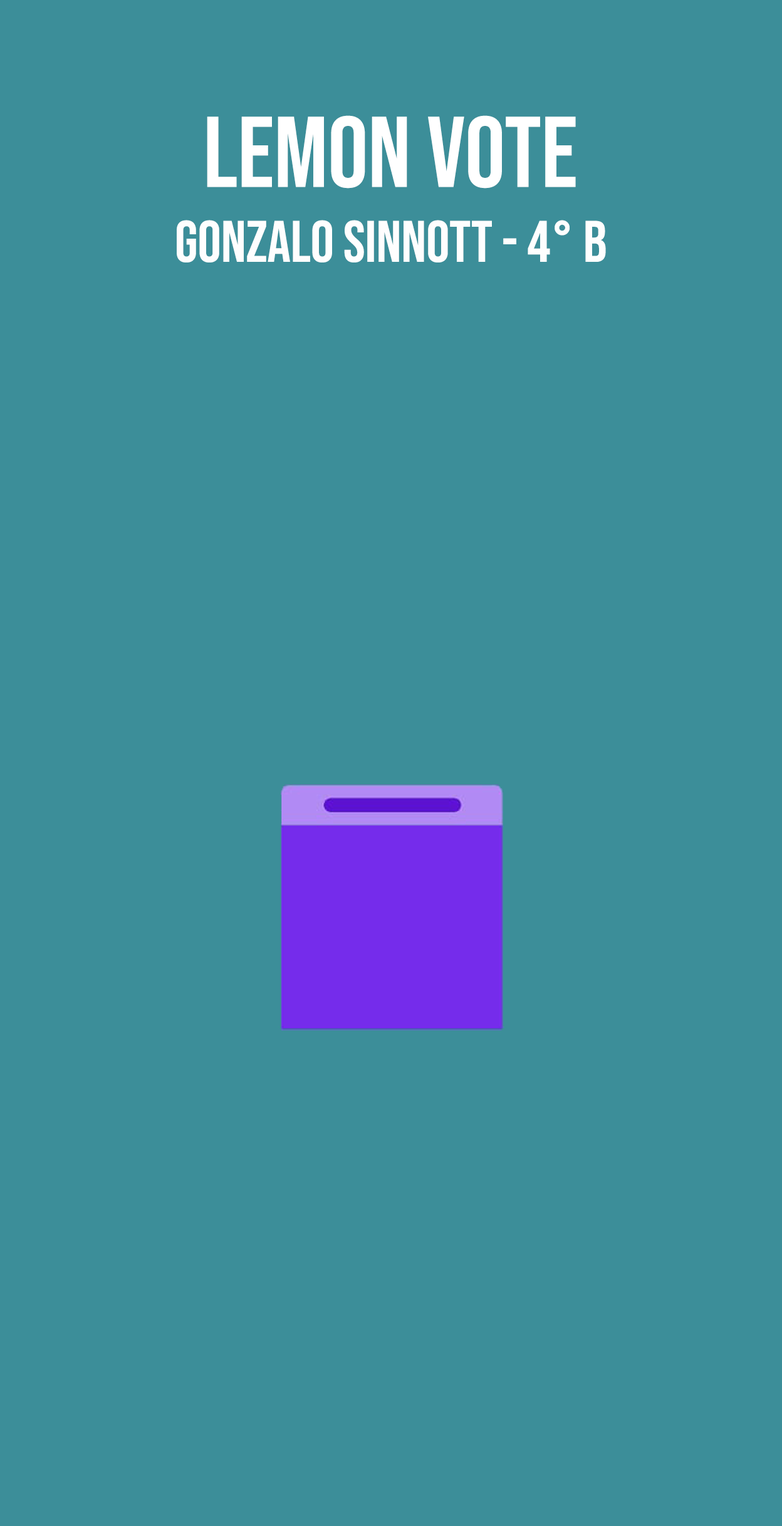
<style>
.page{position:relative;width:782px;height:1526px;background:#3c8e99}
.page>*{position:absolute;margin:0}
.t1{font:100.2px "BebasNeue-Regular";color:#ffffff}
.t2{font:58.5px "BebasNeue-Regular";color:#fefefe}
</style>
<div class="page">
<p class="t1" style="left:207px;top:115px;width:369px;height:74px">LEMON vote</p>
<p class="t2" style="left:177px;top:220px;width:429px;height:42px">GONZALO SINNOTT - 4° B</p>
</div>
